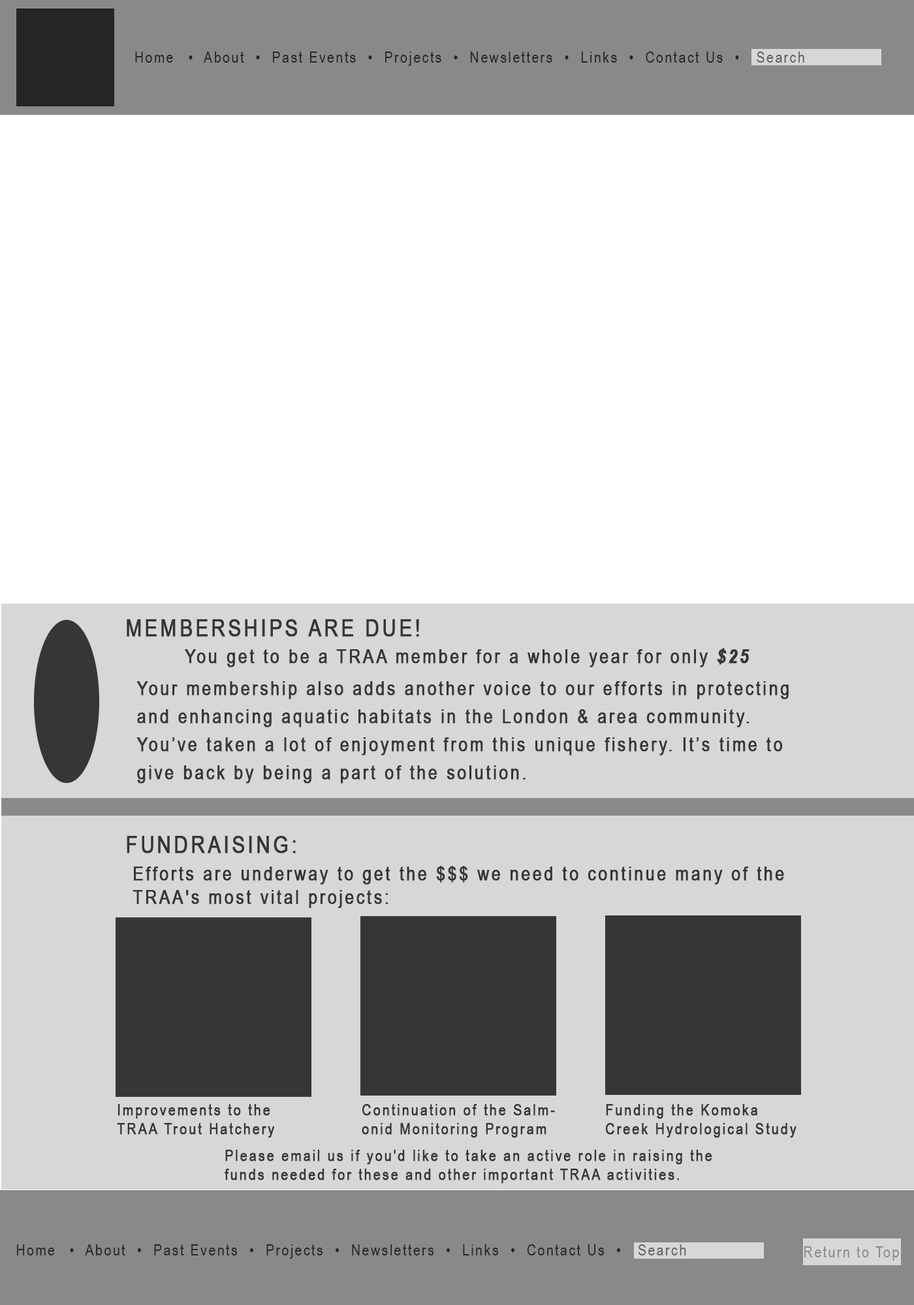
<style>
.page{position:relative;width:914px;height:1305px;background:#ffffff}
.page>*{position:absolute;margin:0}
.t1{font:15.7px "ArialNarrow";letter-spacing:0.1em;color:#252525}
.t2{font:15.7px "ArialNarrow";letter-spacing:0.1em;color:#5f5f5f}
.t3{font:23.5px "ArialNarrow";letter-spacing:0.1em;color:#363636;font-weight:bold}
.t4{font:19.6px "ArialNarrow";letter-spacing:0.1em;color:#363636;font-weight:bold}
.t5{font:19.6px "ArialNarrow-BoldItalic";letter-spacing:0.1em;color:#363636;font-weight:bold}
.t6{font:19.6px/28.1px "ArialNarrow";letter-spacing:0.1em;color:#363636;font-weight:bold}
.t7{font:15.7px "ArialNarrow";letter-spacing:0.1em;color:#363636;font-weight:bold}
.t8{font:15.7px "ArialNarrow";letter-spacing:0.1em;color:#898989}
.t9{font:10.4px "ArialNarrow";letter-spacing:0.1em;color:#898989}
</style>
<div class="page">
<p class="t1" style="left:135px;top:52px;width:669px;height:14px">Home  •  About  •  Past Events  •  Projects  •  Newsletters  •  Links  •  Contact Us  •   <span class="t2">Search</span></p>
<p class="t3" style="left:127px;top:619px;width:292px;height:18px">MEMBERSHIPS ARE DUE!</p>
<p class="t4" style="left:185px;top:648px;width:564px;height:20px">You get to be a TRAA member for a whole year for only <span class="t5">$25</span></p>
<p class="t6" style="left:136px;top:681px;width:652px;height:103px">Your membership also adds another voice to our efforts in protecting <br>and enhancing aquatic habitats in the London &amp; area community.<br>You’ve taken a lot of enjoyment from this unique fishery. It’s time to<br>give back by being a part of the solution.</p>
<p class="t3" style="left:127px;top:836px;width:169px;height:18px">FUNDRAISING:</p>
<p class="t4" style="left:132px;top:866px;width:652px;height:42px">Efforts are underway to get the $$$ we need to continue many of the<br>TRAA's most vital projects:</p>
<p class="t7" style="left:117px;top:1104px;width:158px;height:34px">Improvements to the<br>TRAA Trout Hatchery</p>
<p class="t7" style="left:362px;top:1104px;width:193px;height:34px">Continuation of the Salm-<br>onid Monitoring Program</p>
<p class="t7" style="left:606px;top:1104px;width:190px;height:34px">Funding the Komoka<br>Creek Hydrological Study</p>
<p class="t7" style="left:224px;top:1150px;width:488px;height:34px">Please email us if you'd like to take an active role in raising the <br>funds needed for these and other important TRAA activities.</p>
<p class="t1" style="left:17px;top:1244px;width:669px;height:15px">Home  •  About  •  Past Events  •  Projects  •  Newsletters  •  Links  •  Contact Us  •   <span class="t2">Search</span></p>
<p class="t8" style="left:804px;top:1246px;width:95px;height:15px"><span class="t9"><br></span>Return to Top</p>
</div>
